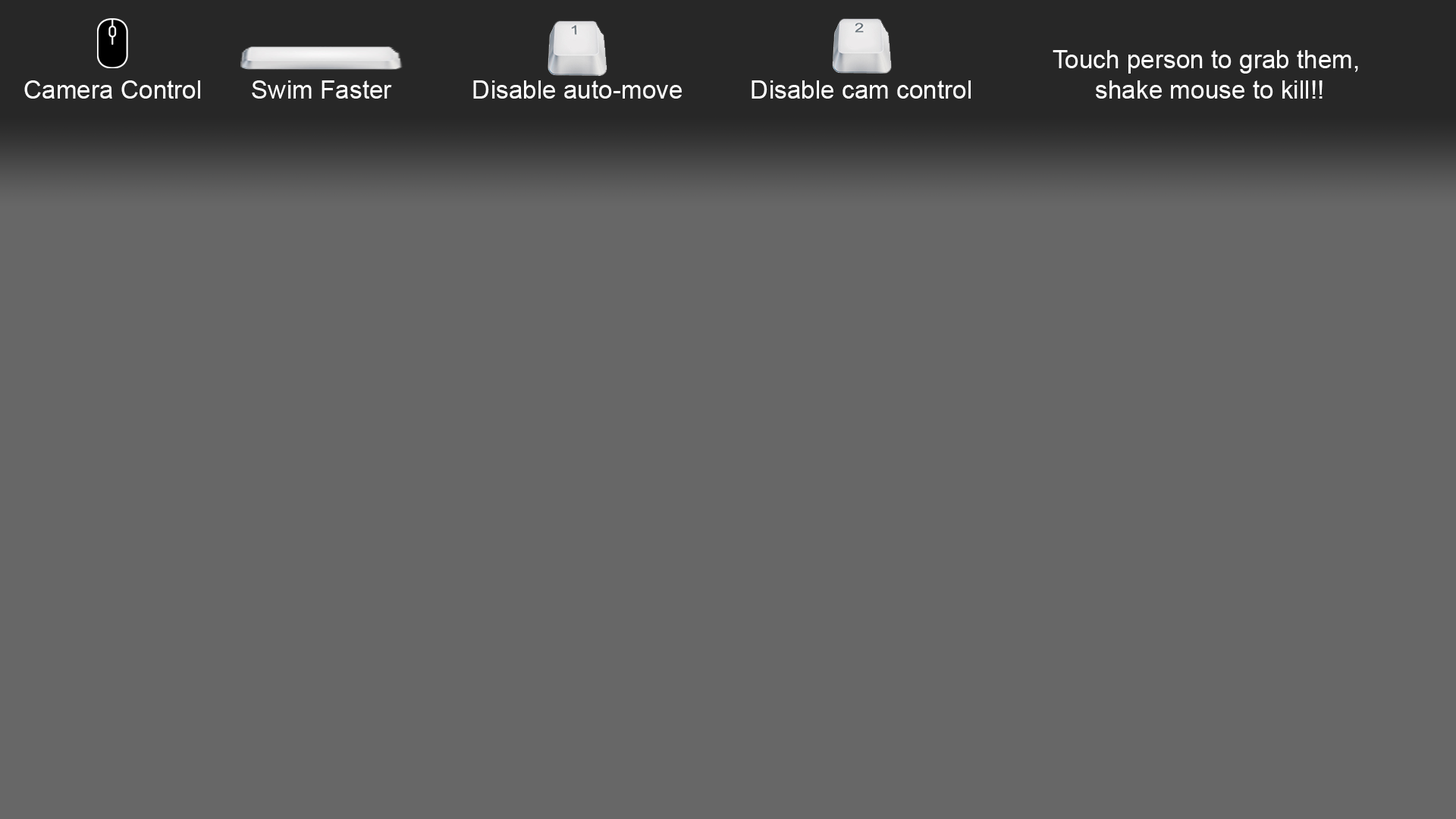
<style>
.page{position:relative;width:1456px;height:819px;background:#676767}
.page>*{position:absolute;margin:0}
.t1{font:25.3px "ArialMT";color:#ffffff}
</style>
<div class="page">
<p class="t1" style="left:1053px;top:50px;width:305px;height:49px;text-align:center">Touch person to grab them,<br> shake mouse to kill!!</p>
<p class="t1" style="left:24px;top:80px;width:176px;height:19px">Camera Control</p>
<p class="t1" style="left:252px;top:80px;width:140px;height:19px">Swim Faster</p>
<p class="t1" style="left:473px;top:80px;width:209px;height:19px">Disable auto-move</p>
<p class="t1" style="left:751px;top:80px;width:220px;height:19px">Disable cam control</p>
</div>
